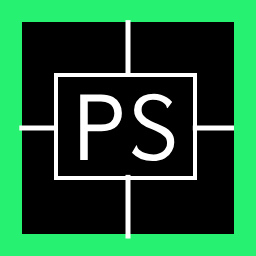
<style>
.page{position:relative;width:256px;height:256px;background:#000000}
.page>*{position:absolute;margin:0}
.t1{font:105px "Inconsolata-Regular";color:#27f171}
.t2{font:105px "Inconsolata-Regular";color:#ffffff}
</style>
<div class="page">
<p class="t1" style="left:80px;top:93px;width:95px;height:69px">P<span class="t2">S</span></p>
</div>
